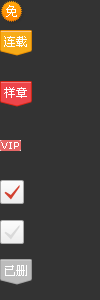
<style>
.page{position:relative;width:100px;height:300px;background:#333333}
.page>*{position:absolute;margin:0}
.t1{font:12px "SimSun";letter-spacing:0.02em;color:#ffffff}
.t2{font:12px "SimSun";letter-spacing:0.025em;color:#ffffff}
</style>
<div class="page">
<p class="t1" style="left:6px;top:5px;width:11px;height:12px">免</p>
<p class="t2" style="left:4px;top:36px;width:23px;height:11px">连载</p>
<p class="t2" style="left:4px;top:87px;width:23px;height:11px">样章</p>
<p class="t2" style="left:5px;top:265px;width:22px;height:11px">已删</p>
</div>
